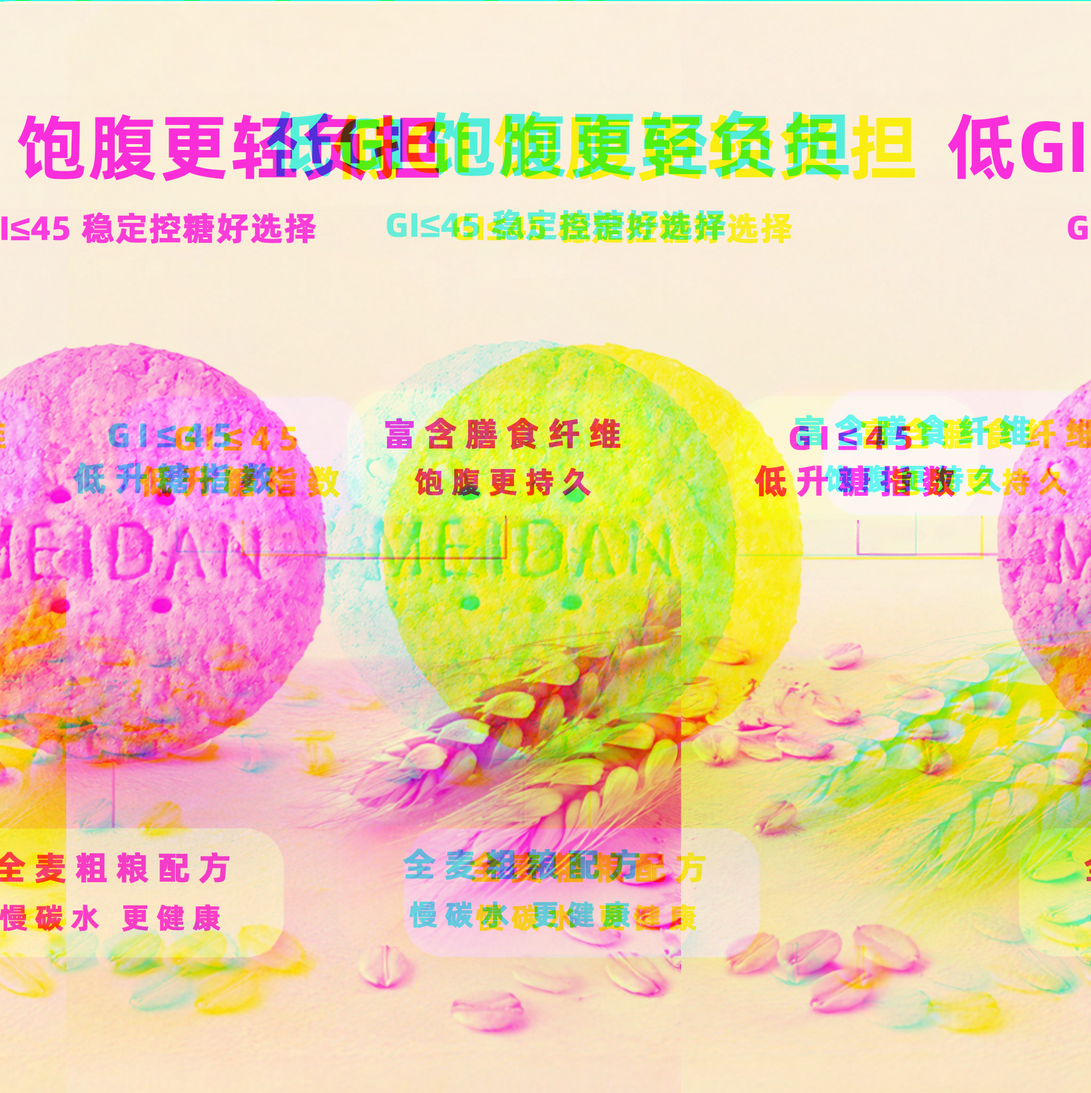
<style>
.page{position:relative;width:1091px;height:1093px}
.page>*{position:absolute;margin:0}
.t1{font:72.1px "AlibabaPuHuiTi-Bold"}
.t2{font:33.4px "AlibabaPuHuiTi-Bold";font-weight:bold}
.t3{font:33.4px "AlibabaPuHuiTi-Bold";letter-spacing:0.22em;font-weight:bold}
.t4{font:34px "AlibabaPuHuiTi-Bold";letter-spacing:0.22em;font-weight:bold}
.t5{font:30px "AlibabaPuHuiTi-Bold";letter-spacing:0.22em;font-weight:bold}
.t6{font:29px "AlibabaPuHuiTi-Bold";letter-spacing:0.22em;font-weight:bold}
</style>
<div class="page">
<p class="t1" style="left:266px;top:109px;width:583px;height:68px">低GI 饱腹更轻负担</p>
<p class="t2" style="left:386px;top:208px;width:340px;height:32px">GI≤45 稳定控糖好选择</p>
<p class="t3" style="left:795px;top:413px;width:236px;height:33px">富含膳食纤维</p>
<p class="t3" style="left:108px;top:422px;width:123px;height:25px">GI≤45</p>
<p class="t4" style="left:73px;top:461px;width:201px;height:32px">低升糖指数</p>
<p class="t5" style="left:825px;top:463px;width:176px;height:29px">饱腹更持久</p>
<p class="t3" style="left:403px;top:848px;width:236px;height:31px">全麦粗粮配方</p>
<p class="t6" style="left:409px;top:900px;width:221px;height:28px">慢碳水 更健康</p>
</div>
